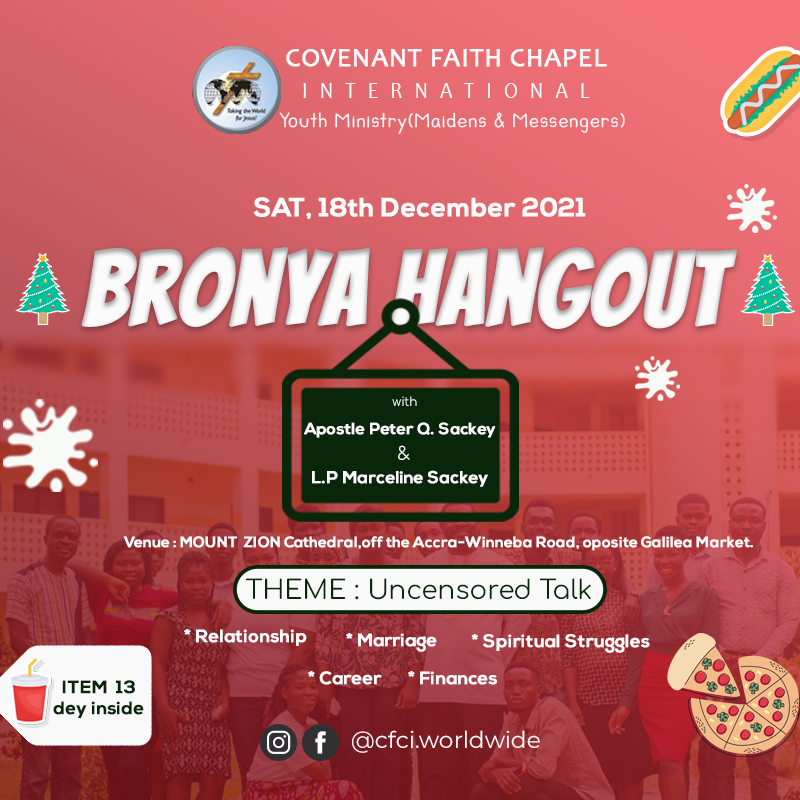
<style>
.page{position:relative;width:800px;height:800px}
.page>*{position:absolute;margin:0}
.t1{font:26.8px "Candara";letter-spacing:0.015em;color:#fcfbfc;font-weight:bold}
.t2{font:23.9px "Candara";letter-spacing:0.615em;color:#fcfbfc;scale:0.83 1}
.t3{font:19px "Child'sHand";letter-spacing:0.08em;color:#faf7fa;font-weight:bold}
.t4{font:26px "NexaBold";color:#fbfbfb;font-weight:bold}
.t5{font:102px "Bangers-Regular";color:#fbfbfb;font-weight:bold}
.t6{font:12px "Comfortaa-Regular";color:#fbfbfb;font-weight:bold}
.t7{font:16px "NexaBold";color:#fbfbfb;font-weight:bold}
.t8{font:18px "Comfortaa-Regular";color:#fbfbfb;font-weight:bold}
.t9{font:17px "NexaBold";color:#fbfbfb;font-weight:bold}
.t10{font:15px "NexaBold";color:#fbfbfb;font-weight:bold}
.t11{font:26px "Comfortaa-Regular";color:#09260b;font-weight:bold}
.t12{font:26px "Comfortaa-Regular";color:#09260b;text-transform:uppercase;font-weight:bold}
.t13{font:18px "NexaBold";color:#fbfbfb;font-weight:bold}
.t14{font:18px "NexaBold";color:#09260b;font-weight:bold}
.t15{font:23.2px "Montserrat-Regular";color:#fdf9fd}
</style>
<div class="page">
<p class="t1" style="left:286px;top:49px;width:321px;height:49px;text-align:center">COVENANT FAITH CHAPEL<br><span class="t2">INTERNATIONAL</span></p>
<p class="t3" style="left:279px;top:112px;width:346px;height:22px">Youth Ministry(Maidens &amp; Messengers)</p>
<p class="t4" style="left:253px;top:197px;width:333px;height:22px">SAT, 18th December 2021</p>
<p class="t5" style="left:81px;top:247px;width:657px;height:82px">Bronya Hangout</p>
<p class="t6" style="left:392px;top:396px;width:25px;height:10px">with</p>
<p class="t7" style="left:304px;top:422px;width:192px;height:16px">Apostle Peter Q. Sackey</p>
<p class="t8" style="left:398px;top:445px;width:12px;height:15px">&amp;</p>
<p class="t9" style="left:312px;top:470px;width:176px;height:17px">L.P Marceline Sackey</p>
<p class="t10" style="left:123px;top:536px;width:630px;height:15px">Venue : MOUNT  ZION Cathedral,off the Accra-Winneba Road, oposite Galilea Market.</p>
<p class="t11" style="left:246px;top:578px;width:345px;height:22px"><span class="t12">Theme : </span>Uncensored Talk</p>
<p class="t13" style="left:184px;top:629px;width:123px;height:17px">* Relationship</p>
<p class="t13" style="left:346px;top:633px;width:91px;height:19px">* Marriage</p>
<p class="t13" style="left:471px;top:634px;width:179px;height:19px">* Spiritual Struggles</p>
<p class="t13" style="left:308px;top:671px;width:74px;height:14px">* Career</p>
<p class="t13" style="left:408px;top:671px;width:89px;height:14px">* Finances</p>
<p class="t14" style="left:53px;top:680px;width:91px;height:38px;text-align:center">ITEM  13<br>dey inside</p>
<p class="t15" style="left:352px;top:730px;width:188px;height:23px">@cfci.worldwide</p>
</div>
